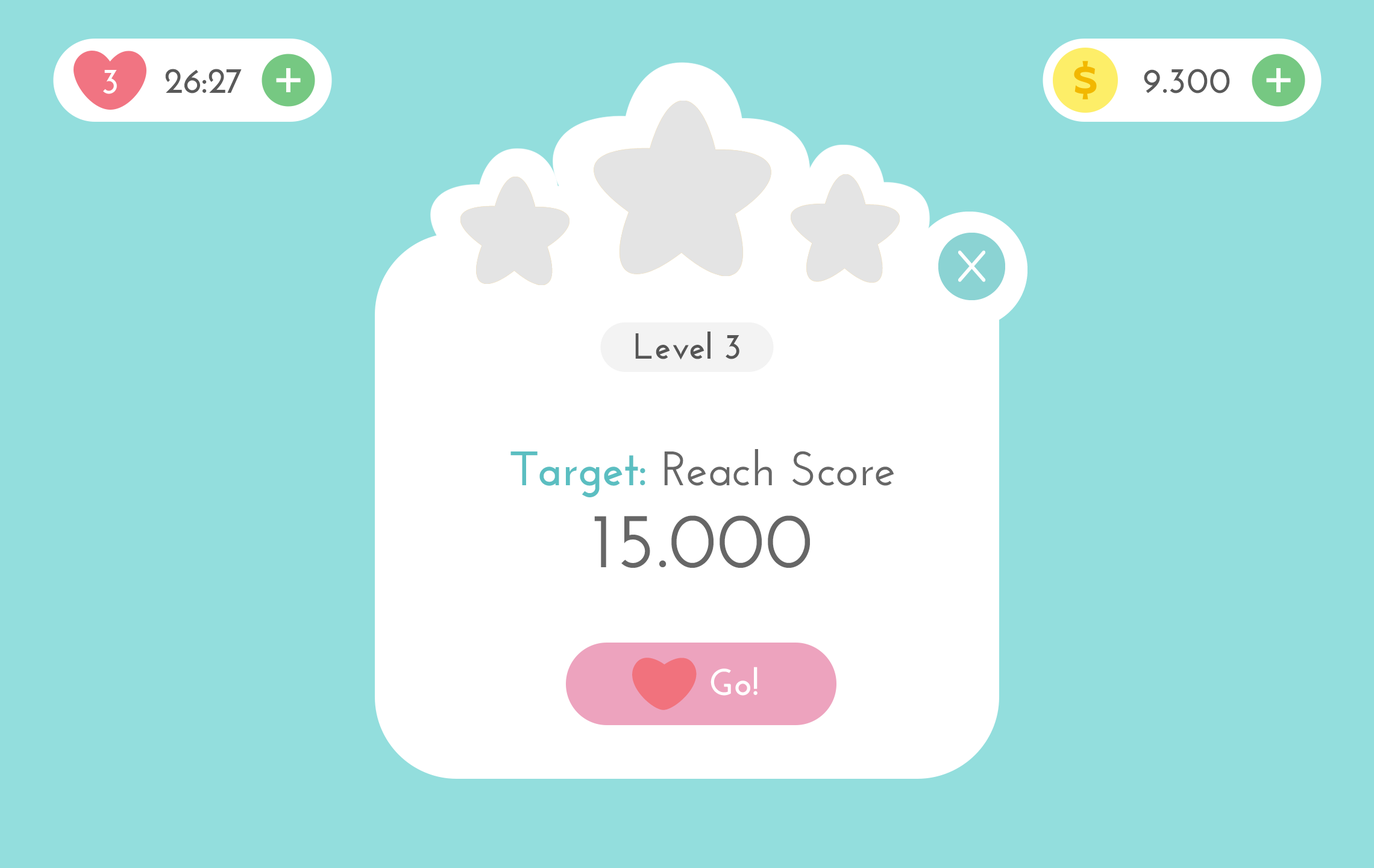
<style>
.page{position:relative;width:1374px;height:868px;background:#93dedd}
.page>*{position:absolute;margin:0}
.t1{font:36.2px "JosefinSans-Bold";color:#ffffff}
.t2{font:36.2px "JosefinSans-Bold";color:#595959}
.t3{font:36.2px "JosefinSans-Bold";color:#555555}
.t4{font:48.2px "JosefinSans-SemiBold";color:#666666}
.t5{font:48.2px "JosefinSans-Bold";color:#5bbec1}
.t6{font:78.3px "JosefinSans-SemiBold";color:#666666}
.t7{font:37.2px "JosefinSans-Bold";color:#ffffff}
</style>
<div class="page">
<p class="t1" style="left:103px;top:70px;width:14px;height:24px">3</p>
<p class="t2" style="left:165px;top:69px;width:77px;height:24px">26:27</p>
<p class="t2" style="left:1144px;top:69px;width:86px;height:24px">9.300</p>
<p class="t3" style="left:635px;top:331px;width:104px;height:29px">Level 3</p>
<p class="t4" style="left:510px;top:449px;width:384px;height:48px"><span class="t5">Target: </span>Reach Score</p>
<p class="t6" style="left:594px;top:515px;width:216px;height:53px">15.000</p>
<p class="t7" style="left:711px;top:667px;width:47px;height:28px">Go!</p>
</div>
